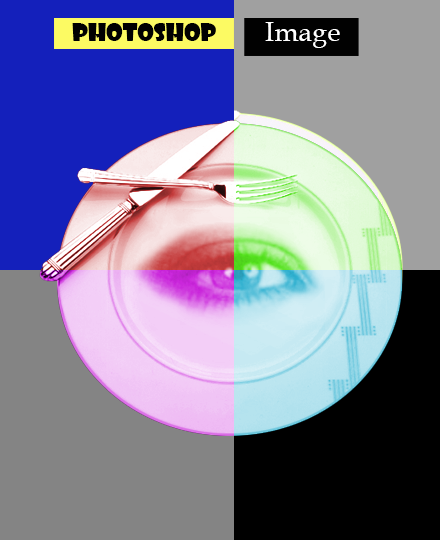
<style>
.page{position:relative;width:440px;height:540px}
.page>*{position:absolute;margin:0}
.t1{font:23.6px "ShowcardGothic-Reg";color:#010101}
.t2{font:27.3px "BookAntiqua";color:#ffffff}
</style>
<div class="page">
<p class="t1" style="left:72px;top:23px;width:144px;height:18px">Photoshop</p>
<p class="t2" style="left:265px;top:22px;width:75px;height:26px">Image</p>
</div>
